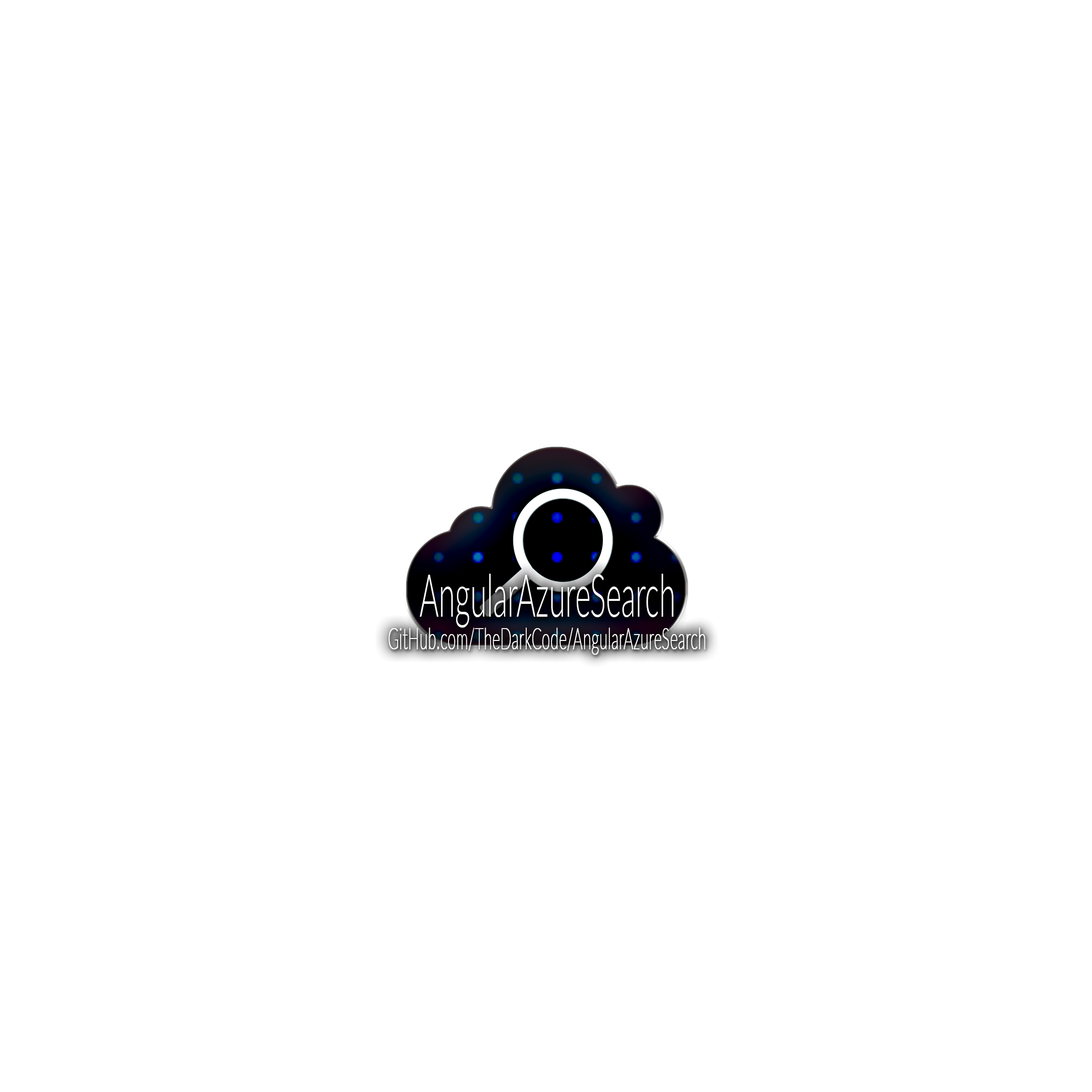
<style>
.page{position:relative;width:1092px;height:1092px;background:#ffffff}
.page>*{position:absolute;margin:0}
.t1{font:59.3px "Lato-Light";color:#fdfdfe;scale:0.5 1}
.t2{font:29.7px "Lato-Thin";color:#fefefe;font-weight:bold;scale:0.5 1}
</style>
<div class="page">
<p class="t1" style="left:419px;top:574px;width:255px;height:54px">AngularAzureSearch</p>
<p class="t2" style="left:388px;top:628px;width:317px;height:27px">GitHub.com/TheDarkCode/AngularAzureSearch</p>
</div>
